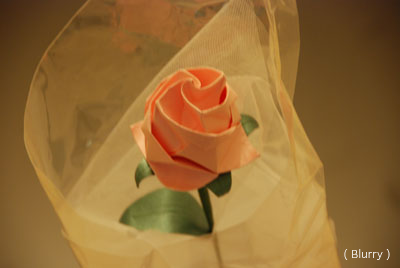
<style>
.page{position:relative;width:400px;height:268px}
.page>*{position:absolute;margin:0}
.t1{font:12px "ClearSans-Thin"}
</style>
<div class="page">
<p class="t1" style="left:344px;top:249px;width:46px;height:11px">( Blurry )</p>
</div>
